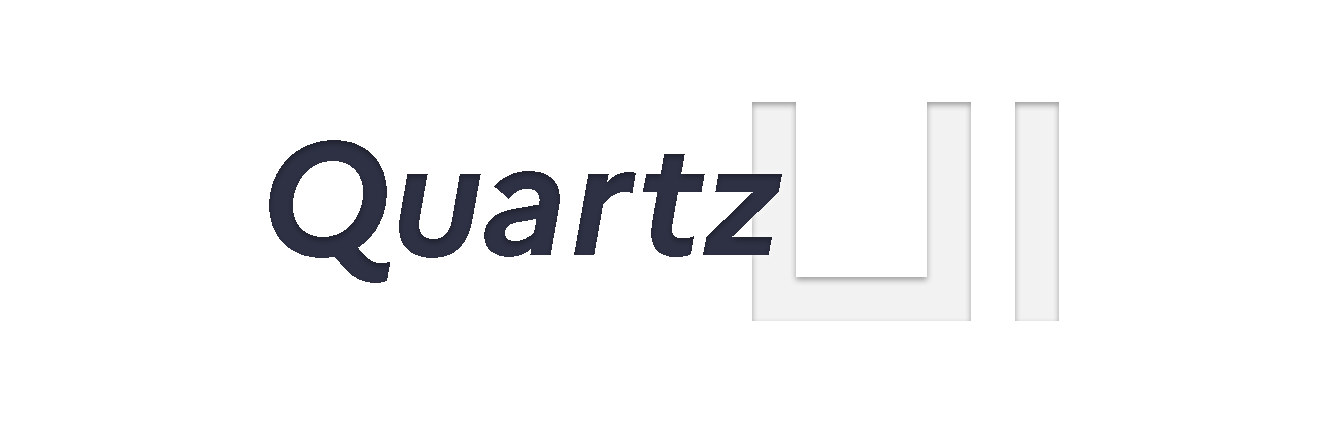
<style>
.page{position:relative;width:1328px;height:423px;background:#ffffff}
.page>*{position:absolute;margin:0}
.t1{font:350px "Android101";color:#f2f2f2}
.t2{font:160px "Marianne-BoldItalic";color:#2d3043}
</style>
<div class="page">
<p class="t1" style="left:752px;top:102px;width:307px;height:219px">UI</p>
<p class="t2" style="left:269px;top:140px;width:513px;height:143px">Quartz</p>
</div>
